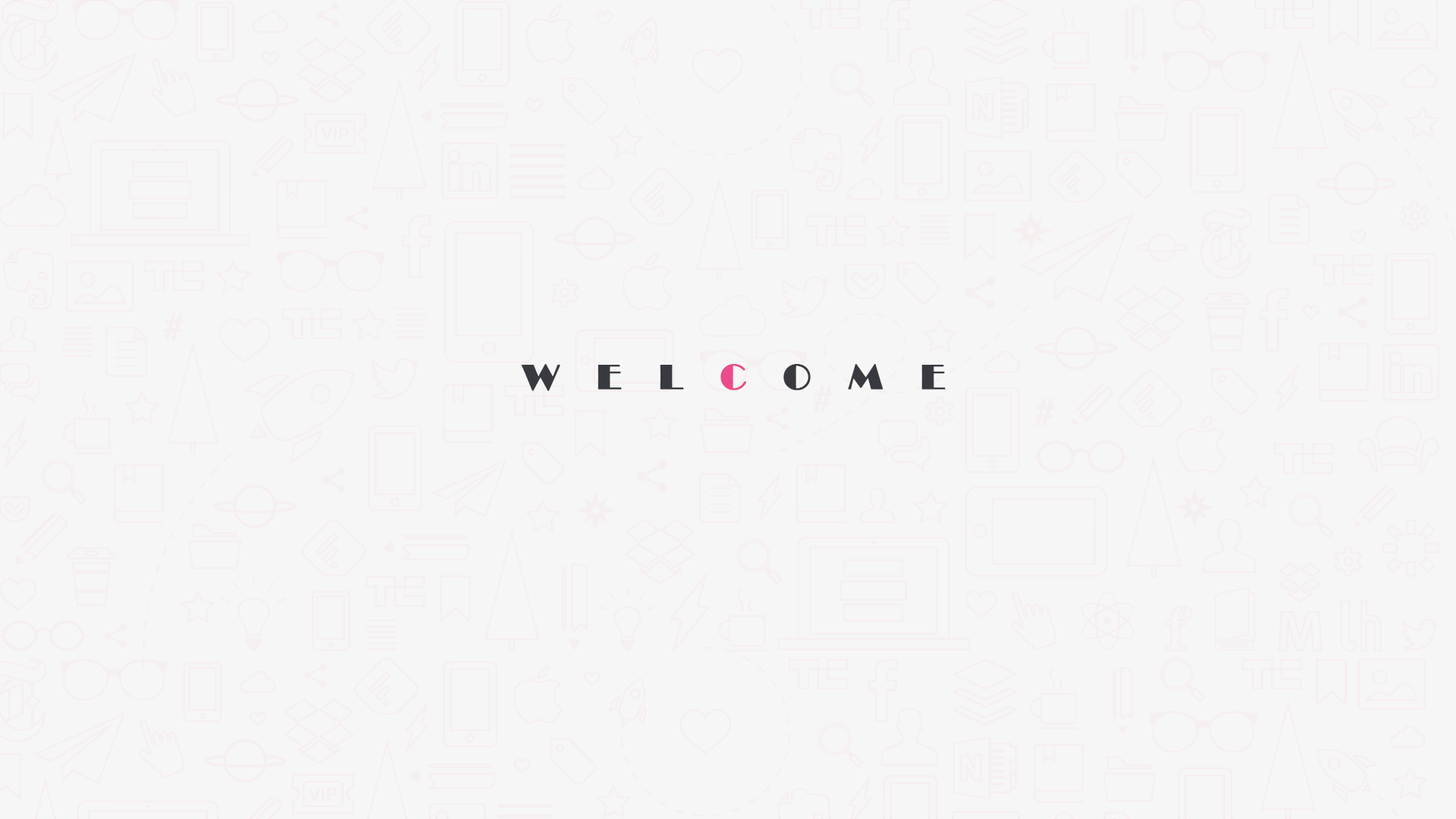
<style>
.page{position:relative;width:1456px;height:819px;background:#f6f6f6}
.page>*{position:absolute;margin:0}
.t1{font:36.4px "Broadway";letter-spacing:1em;color:#393a3f;font-weight:bold}
.t2{font:36.4px "Broadway";letter-spacing:1em;color:#ea4c89;font-weight:bold}
</style>
<div class="page">
<p class="t1" style="left:521px;top:364px;width:425px;height:27px">WEL<span class="t2">C</span>OME</p>
</div>
